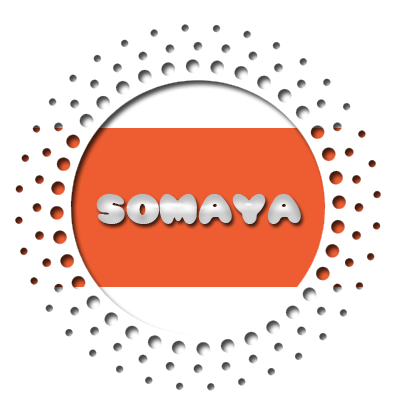
<style>
.page{position:relative;width:400px;height:400px;background:#ffffff}
.page>*{position:absolute;margin:0}
.t1{font:37.9px "Pleasantly-Plump";color:#d1d1d1;scale:0.95 1}
</style>
<div class="page">
<p class="t1" style="left:96px;top:194px;width:205px;height:30px">Somaya</p>
</div>
